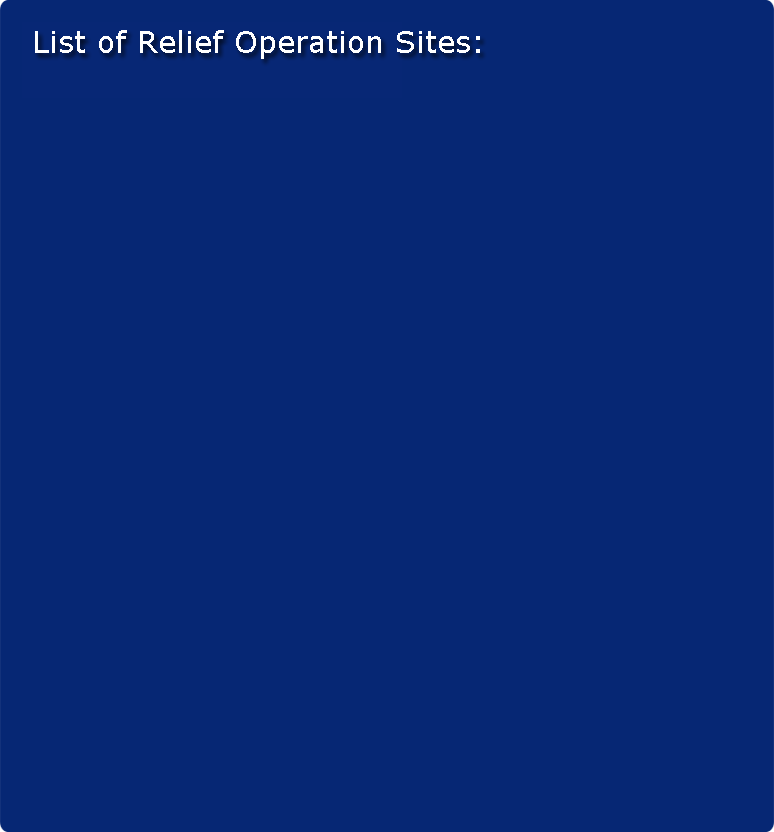
<style>
.page{position:relative;width:774px;height:832px;background:#062774}
.page>*{position:absolute;margin:0}
.t1{font:30px "Verdana";color:#ffffff}
</style>
<div class="page">
<p class="t1" style="left:35px;top:30px;width:445px;height:29px">List of Relief Operation Sites:</p>
</div>
